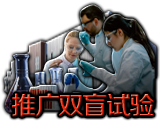
<style>
.page{position:relative;width:164px;height:140px;background:#ffffff}
.page>*{position:absolute;margin:0}
.t1{font:25.2px "FZZZHUNHJW--GB1-0";letter-spacing:-0.06em}
</style>
<div class="page">
<p class="t1" style="left:12px;top:93px;width:142px;height:24px">推广双盲试验</p>
</div>
